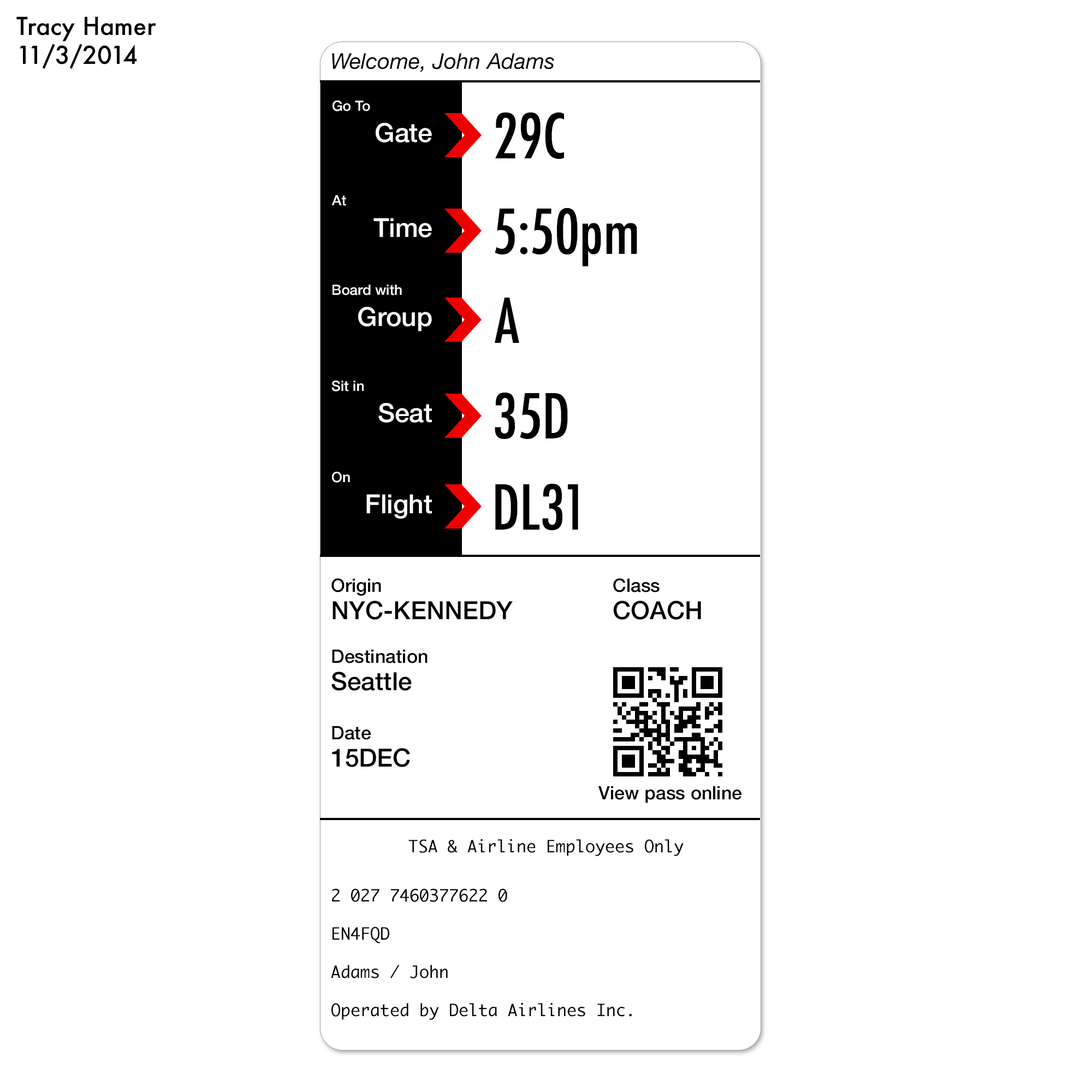
<style>
.page{position:relative;width:1092px;height:1092px;background:#ffffff}
.page>*{position:absolute;margin:0}
.t1{font:24px "Futura-Medium";color:#000000}
.t2{font:21.8px "HelveticaNeue-Italic";color:#000000}
.t3{font:14.2px "HelveticaNeue-Medium";color:#ffffff}
.t4{font:60.1px "Futura-CondensedMedium";color:#000000}
.t5{font:26.2px "HelveticaNeue-Medium";color:#ffffff}
.t6{font:18.6px "HelveticaNeue-Medium";color:#000000}
.t7{font:25.1px "HelveticaNeue-Medium";color:#000000}
.t8{font:16.4px "Monaco";color:#000000}
</style>
<div class="page">
<p class="t1" style="left:16px;top:16px;width:140px;height:53px">Tracy Hamer<br>11/3/2014</p>
<p class="t2" style="left:332px;top:53px;width:222px;height:19px">Welcome, John Adams</p>
<p class="t3" style="left:333px;top:100px;width:37px;height:11px">Go To</p>
<p class="t4" style="left:495px;top:112px;width:69px;height:47px">29C</p>
<p class="t5" style="left:376px;top:123px;width:56px;height:20px">Gate</p>
<p class="t3" style="left:331px;top:195px;width:15px;height:11px">At</p>
<p class="t4" style="left:495px;top:208px;width:142px;height:58px">5:50pm</p>
<p class="t5" style="left:373px;top:218px;width:59px;height:20px">Time</p>
<p class="t3" style="left:333px;top:284px;width:69px;height:11px">Board with</p>
<p class="t4" style="left:495px;top:298px;width:24px;height:45px">A</p>
<p class="t5" style="left:358px;top:307px;width:74px;height:24px">Group</p>
<p class="t3" style="left:331px;top:381px;width:33px;height:10px">Sit in</p>
<p class="t4" style="left:495px;top:393px;width:73px;height:46px">35D</p>
<p class="t5" style="left:378px;top:403px;width:54px;height:20px">Seat</p>
<p class="t3" style="left:332px;top:472px;width:18px;height:11px">On</p>
<p class="t4" style="left:495px;top:484px;width:83px;height:46px">DL31</p>
<p class="t5" style="left:366px;top:494px;width:66px;height:25px">Flight</p>
<p class="t6" style="left:331px;top:578px;width:50px;height:18px">Origin</p>
<p class="t6" style="left:613px;top:578px;width:47px;height:14px">Class</p>
<p class="t7" style="left:333px;top:601px;width:180px;height:19px">NYC-KENNEDY</p>
<p class="t7" style="left:613px;top:601px;width:88px;height:19px">COACH</p>
<p class="t6" style="left:332px;top:649px;width:96px;height:14px">Destination</p>
<p class="t7" style="left:331px;top:672px;width:81px;height:19px">Seattle</p>
<p class="t6" style="left:332px;top:726px;width:39px;height:14px">Date</p>
<p class="t7" style="left:332px;top:748px;width:78px;height:19px">15DEC</p>
<p class="t6" style="left:598px;top:786px;width:143px;height:17px">View pass online</p>
<p class="t8" style="left:408px;top:839px;width:276px;height:17px">TSA &amp; Airline Employees Only</p>
<p class="t8" style="left:332px;top:888px;width:175px;height:14px">2 027 7460377622 0</p>
<p class="t8" style="left:333px;top:927px;width:56px;height:16px">EN4FQD</p>
<p class="t8" style="left:331px;top:965px;width:117px;height:13px">Adams / John</p>
<p class="t8" style="left:331px;top:1002px;width:301px;height:18px">Operated by Delta Airlines Inc.</p>
</div>
